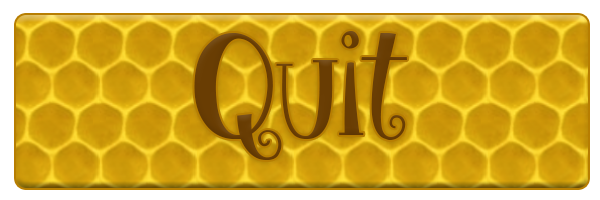
<style>
.page{position:relative;width:600px;height:200px}
.page>*{position:absolute;margin:0}
.t1{font:146.5px "give_me_some_sugar";color:#693d03}
</style>
<div class="page">
<p class="t1" style="left:194px;top:31px;width:213px;height:129px">Quit</p>
</div>
